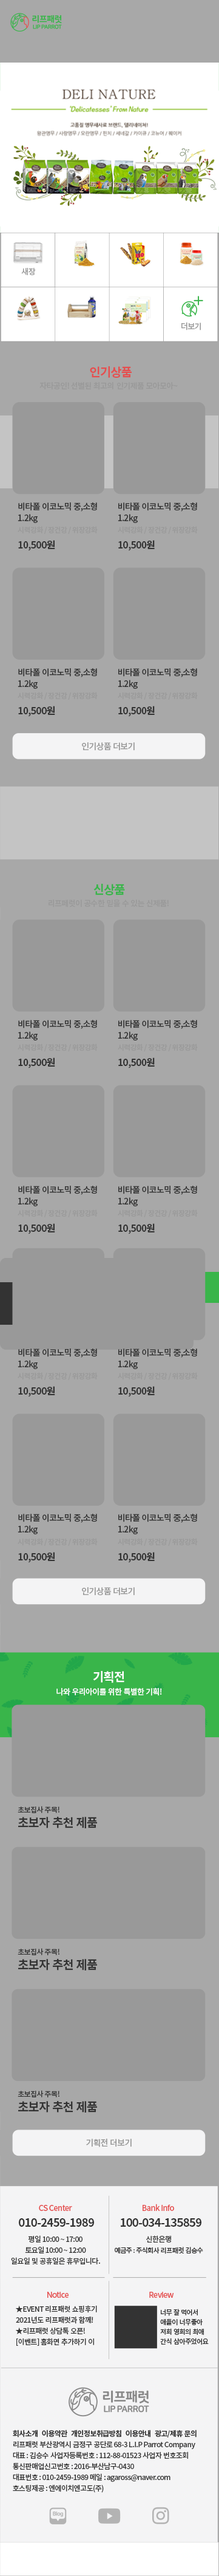
<style>
.page{position:relative;width:219px;height:2576px;background:#a8a8a8}
.page>*{position:absolute;margin:0}
.t1{font:7.9px "NotoSansCJKkr-Medium";letter-spacing:-0.05em;color:#999999}
.t2{font:12.1px "NotoSansCJKkr-Bold";letter-spacing:-0.05em;color:#e54e4e}
.t3{font:8.5px/11.5px "NotoSansCJKkr-Medium";letter-spacing:-0.05em;color:#333333}
.t4{font:7.3px "NotoSansCJKkr-Medium";letter-spacing:-0.05em;color:#999999}
.t5{font:9.7px "NotoSansCJKkr-Bold";letter-spacing:-0.05em;color:#333333}
.t6{font:8.5px "NotoSansCJKkr-Medium";letter-spacing:-0.05em;color:#999999}
.t7{font:12.1px "NotoSansCJKkr-Bold";letter-spacing:-0.05em;color:#39b54a}
.t8{font:12.1px "NotoSansCJKkr-Bold";letter-spacing:-0.05em;color:#ffffff}
.t9{font:7.9px "NotoSansCJKkr-Medium";letter-spacing:-0.05em;color:#ffffff}
.t10{font:7.3px "NotoSansCJKkr-Medium";letter-spacing:-0.05em;color:#333333}
.t11{font:12.1px "NotoSansCJKkr-Bold";letter-spacing:-0.05em;color:#333333}
.t12{font:7.9px "NotoSansCJKkr-Medium";letter-spacing:-0.05em;color:#e54e4e}
.t13{font:11.5px "NotoSansCJKkr-Bold";letter-spacing:-0.05em;color:#333333}
.t14{font:7.3px/10.9px "NotoSansCJKkr-Medium";letter-spacing:-0.05em;color:#333333}
.t15{font:6.7px/10.9px "NotoSansCJKkr-Medium";letter-spacing:-0.05em;color:#333333}
.t16{font:6.7px/9.7px "NotoSansCJKkr-Medium";letter-spacing:-0.05em;color:#333333}
.t17{font:7.3px/10.9px "NotoSansCJKkr-Bold";letter-spacing:-0.05em;color:#333333}
</style>
<div class="page">
<p class="t1" style="left:21px;top:268px;width:15px;height:7px">새장</p>
<p class="t1" style="left:182px;top:322px;width:19px;height:8px">더보기</p>
<p class="t2" style="left:90px;top:366px;width:42px;height:12px">인기상품</p>
<p class="t1" style="left:39px;top:381px;width:139px;height:9px">자타공인! 선별된 최고의  인기제품 모아모아~</p>
<p class="t3" style="left:18px;top:502px;width:79px;height:21px">비타폴 이코노믹 중,소형<br>1.2kg</p>
<p class="t3" style="left:118px;top:502px;width:79px;height:21px">비타폴 이코노믹 중,소형<br>1.2kg</p>
<p class="t4" style="left:18px;top:526px;width:80px;height:8px">시력강화 / 장건강 / 위장강화</p>
<p class="t4" style="left:118px;top:526px;width:80px;height:8px">시력강화 / 장건강 / 위장강화</p>
<p class="t5" style="left:18px;top:540px;width:37px;height:11px">10,500원</p>
<p class="t5" style="left:118px;top:540px;width:37px;height:11px">10,500원</p>
<p class="t3" style="left:18px;top:668px;width:79px;height:21px">비타폴 이코노믹 중,소형<br>1.2kg</p>
<p class="t3" style="left:118px;top:668px;width:79px;height:21px">비타폴 이코노믹 중,소형<br>1.2kg</p>
<p class="t4" style="left:18px;top:692px;width:80px;height:8px">시력강화 / 장건강 / 위장강화</p>
<p class="t4" style="left:118px;top:692px;width:80px;height:8px">시력강화 / 장건강 / 위장강화</p>
<p class="t5" style="left:18px;top:706px;width:37px;height:11px">10,500원</p>
<p class="t5" style="left:118px;top:706px;width:37px;height:11px">10,500원</p>
<p class="t6" style="left:82px;top:742px;width:53px;height:9px">인기상품 더보기</p>
<p class="t7" style="left:94px;top:884px;width:31px;height:11px">신상품</p>
<p class="t1" style="left:49px;top:899px;width:120px;height:8px">리프페럿이 공수한 믿을 수 있는 신제품!</p>
<p class="t3" style="left:18px;top:1020px;width:79px;height:20px">비타폴 이코노믹 중,소형<br>1.2kg</p>
<p class="t3" style="left:118px;top:1020px;width:79px;height:20px">비타폴 이코노믹 중,소형<br>1.2kg</p>
<p class="t4" style="left:18px;top:1044px;width:80px;height:7px">시력강화 / 장건강 / 위장강화</p>
<p class="t4" style="left:118px;top:1044px;width:80px;height:7px">시력강화 / 장건강 / 위장강화</p>
<p class="t5" style="left:18px;top:1057px;width:37px;height:11px">10,500원</p>
<p class="t5" style="left:118px;top:1057px;width:37px;height:11px">10,500원</p>
<p class="t3" style="left:18px;top:1186px;width:79px;height:20px">비타폴 이코노믹 중,소형<br>1.2kg</p>
<p class="t3" style="left:118px;top:1186px;width:79px;height:20px">비타폴 이코노믹 중,소형<br>1.2kg</p>
<p class="t4" style="left:18px;top:1209px;width:80px;height:8px">시력강화 / 장건강 / 위장강화</p>
<p class="t4" style="left:118px;top:1209px;width:80px;height:8px">시력강화 / 장건강 / 위장강화</p>
<p class="t5" style="left:18px;top:1223px;width:37px;height:11px">10,500원</p>
<p class="t5" style="left:118px;top:1223px;width:37px;height:11px">10,500원</p>
<p class="t3" style="left:18px;top:1348px;width:79px;height:21px">비타폴 이코노믹 중,소형<br>1.2kg</p>
<p class="t3" style="left:118px;top:1348px;width:79px;height:21px">비타폴 이코노믹 중,소형<br>1.2kg</p>
<p class="t4" style="left:18px;top:1372px;width:80px;height:8px">시력강화 / 장건강 / 위장강화</p>
<p class="t4" style="left:118px;top:1372px;width:80px;height:8px">시력강화 / 장건강 / 위장강화</p>
<p class="t5" style="left:18px;top:1386px;width:37px;height:11px">10,500원</p>
<p class="t5" style="left:118px;top:1386px;width:37px;height:11px">10,500원</p>
<p class="t3" style="left:18px;top:1514px;width:79px;height:20px">비타폴 이코노믹 중,소형<br>1.2kg</p>
<p class="t3" style="left:118px;top:1514px;width:79px;height:20px">비타폴 이코노믹 중,소형<br>1.2kg</p>
<p class="t4" style="left:18px;top:1538px;width:80px;height:8px">시력강화 / 장건강 / 위장강화</p>
<p class="t4" style="left:118px;top:1538px;width:80px;height:8px">시력강화 / 장건강 / 위장강화</p>
<p class="t5" style="left:18px;top:1552px;width:37px;height:11px">10,500원</p>
<p class="t5" style="left:118px;top:1552px;width:37px;height:11px">10,500원</p>
<p class="t6" style="left:82px;top:1587px;width:53px;height:9px">인기상품 더보기</p>
<p class="t8" style="left:93px;top:1671px;width:32px;height:12px">기획전</p>
<p class="t9" style="left:56px;top:1687px;width:106px;height:9px">나와 우리아이를 위한 특별한 기획!</p>
<p class="t10" style="left:18px;top:1806px;width:42px;height:7px">초보집사 주목!</p>
<p class="t11" style="left:18px;top:1817px;width:79px;height:11px">초보자 추천 제품</p>
<p class="t10" style="left:18px;top:1948px;width:42px;height:7px">초보집사 주목!</p>
<p class="t11" style="left:18px;top:1959px;width:79px;height:11px">초보자 추천 제품</p>
<p class="t10" style="left:18px;top:2090px;width:42px;height:7px">초보집사 주목!</p>
<p class="t11" style="left:18px;top:2101px;width:79px;height:12px">초보자 추천 제품</p>
<p class="t6" style="left:86px;top:2139px;width:46px;height:8px">기획전 더보기</p>
<p class="t12" style="left:39px;top:2205px;width:33px;height:6px">CS Center</p>
<p class="t12" style="left:143px;top:2204px;width:31px;height:7px">Bank Info</p>
<p class="t13" style="left:19px;top:2218px;width:75px;height:9px">010-2459-1989</p>
<p class="t13" style="left:121px;top:2218px;width:81px;height:9px">100-034-135859</p>
<p class="t14" style="left:11px;top:2235px;width:89px;height:30px;text-align:center">평일 10:00 ~ 17:00<br>토요일 10:00 ~ 12:00<br>일요일 및 공휴일은 휴무입니다.</p>
<p class="t15" style="left:115px;top:2235px;width:88px;height:19px;text-align:center"><span class="t14">신한은행<br></span>예금주 : 주식회사 리프패럿 김승수</p>
<p class="t12" style="left:47px;top:2292px;width:22px;height:6px">Notice</p>
<p class="t12" style="left:149px;top:2292px;width:25px;height:6px">Review</p>
<p class="t14" style="left:16px;top:2305px;width:81px;height:41px">★EVENT 리프패럿 쇼핑후기 <br>2021년도 리프패럿과 함께!<br>★리프패럿 상담톡 오픈!<br>[이벤트] 홈화면 추가하기 이</p>
<p class="t16" style="left:160px;top:2309px;width:49px;height:36px">너무 잘 먹어서<br>애들이 너무좋아<br>저희 영희의 최애<br>간식 삼아주었어요</p>
<p class="t14" style="left:13px;top:2430px;width:184px;height:63px"><span class="t17">회사소개   이용약관   개인정보취급방침   이용안내   광고/제휴 문의<br></span>리프패럿 부산광역시 금정구 공단로 68-3 L.I.P Parrot Company<br>대표 : 김승수 사업자등록번호 : 112-88-01523 사업자 번호조회<br>통신판매업신고번호 : 2016-부산남구-0430<br>대표번호 : 010-2459-1989 메일 : agaross@naver.com<br>호스팅제공 : 엔에이치엔고도(주)</p>
</div>
